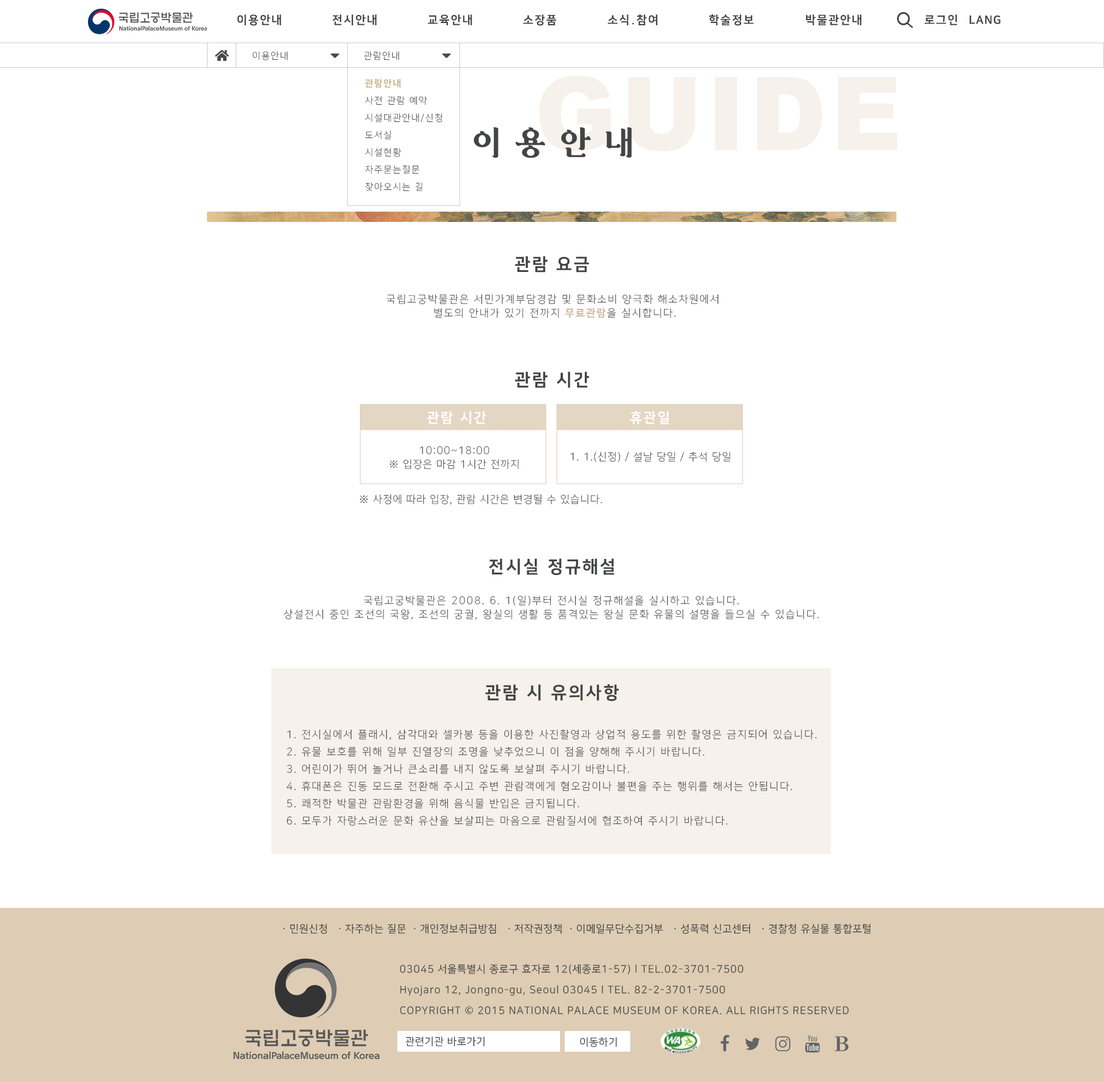
<style>
.page{position:relative;width:1104px;height:1081px;background:#ffffff}
.page>*{position:absolute;margin:0}
.t1{font:11.5px "NanumSquare_acEB";letter-spacing:0.15em;color:#434446}
.t2{font:11.5px "NanumSquare_acEB";letter-spacing:0.05em;color:#434446}
.t3{font:9.2px "NanumSquare_acL";letter-spacing:0.15em;color:#434446}
.t4{font:102.6px "Arial-Black";letter-spacing:0.05em;color:#f6f1ea;scale:0.95 1}
.t5{font:9.2px/17.2px "NanumSquare_acL";letter-spacing:0.15em;color:#434446}
.t6{font:9.2px/17.2px "NanumSquare_acEB";letter-spacing:0.15em;color:#cdb691}
.t7{font:31.6px "MuseumClassicBold";letter-spacing:0.4em;color:#434446}
.t8{font:17.2px "NanumSquare_acEB";letter-spacing:0.15em;color:#434446}
.t9{font:10.3px/13.8px "NanumSquare_acL";letter-spacing:0.15em;color:#434446}
.t10{font:10.3px/13.8px "NanumSquare_acEB";letter-spacing:0.15em;color:#ccb89d}
.t11{font:13.8px "NanumSquare_acEB";letter-spacing:0.15em;color:#ffffff}
.t12{font:10.3px/13.8px "NanumSquare_acL";letter-spacing:0.1em;color:#434446}
.t13{font:10.3px "NanumSquare_acL";letter-spacing:0.1em;color:#434446}
.t14{font:10.3px/17.2px "NanumSquare_acL";letter-spacing:0.15em;color:#434446}
.t15{font:10.3px "NanumSquare_acR";letter-spacing:0.075em;color:#434446}
.t16{font:10.3px/20.7px "NanumSquare_acR";letter-spacing:0.075em;color:#434446}
</style>
<div class="page">
<p class="t1" style="left:237px;top:14px;width:44px;height:12px">이용안내</p>
<p class="t1" style="left:332px;top:14px;width:44px;height:11px">전시안내</p>
<p class="t1" style="left:428px;top:14px;width:44px;height:11px">교육안내</p>
<p class="t1" style="left:523px;top:14px;width:33px;height:12px">소장품</p>
<p class="t1" style="left:608px;top:14px;width:50px;height:11px">소식.참여</p>
<p class="t1" style="left:709px;top:14px;width:45px;height:12px">학술정보</p>
<p class="t1" style="left:805px;top:14px;width:56px;height:11px">박물관안내</p>
<p class="t1" style="left:924px;top:14px;width:33px;height:11px">로그인</p>
<p class="t2" style="left:969px;top:16px;width:31px;height:8px">LANG</p>
<p class="t3" style="left:252px;top:51px;width:35px;height:9px">이용안내</p>
<p class="t3" style="left:363px;top:51px;width:36px;height:9px">관람안내</p>
<p class="t4" style="left:539px;top:76px;width:358px;height:75px">GUIDE</p>
<p class="t5" style="left:364px;top:79px;width:78px;height:112px"><span class="t6">관람안내<br></span>사전 관람 예약<br>시설대관안내/신청<br>도서실<br>시설현황<br>자주묻는질문<br>찾아오시는 길</p>
<p class="t7" style="left:474px;top:127px;width:158px;height:31px">이용안내</p>
<p class="t8" style="left:514px;top:256px;width:75px;height:16px">관람 요금</p>
<p class="t9" style="left:386px;top:294px;width:332px;height:24px;text-align:center">국립고궁박물관은 서민가계부담경감 및 문화소비 양극화 해소차원에서 <br>별도의 안내가 있기 전까지 <span class="t10">무료관람</span>을 실시합니다.</p>
<p class="t8" style="left:514px;top:371px;width:75px;height:17px">관람 시간</p>
<p class="t11" style="left:426px;top:411px;width:60px;height:13px">관람 시간</p>
<p class="t11" style="left:629px;top:410px;width:40px;height:14px">휴관일</p>
<p class="t12" style="left:390px;top:446px;width:128px;height:23px;text-align:center">10:00~18:00<br>※ 입장은 마감 1시간 전까지</p>
<p class="t13" style="left:570px;top:451px;width:160px;height:11px">1. 1.(신정) / 설날 당일 / 추석 당일</p>
<p class="t13" style="left:360px;top:494px;width:242px;height:11px">※ 사정에 따라 입장, 관람 시간은 변경될 수 있습니다.</p>
<p class="t8" style="left:489px;top:558px;width:125px;height:17px">전시실 정규해설</p>
<p class="t9" style="left:283px;top:595px;width:535px;height:25px;text-align:center">국립고궁박물관은 2008. 6. 1(일)부터 전시실 정규해설을 실시하고 있습니다.<br>상설전시 중인 조선의 국왕, 조선의 궁궐, 왕실의 생활 등 품격있는 왕실 문화 유물의 설명을 들으실 수 있습니다.</p>
<p class="t8" style="left:485px;top:684px;width:133px;height:17px">관람 시 유의사항</p>
<p class="t14" style="left:286px;top:729px;width:530px;height:96px">1. 전시실에서 플래시, 삼각대와 셀카봉 등을 이용한 사진촬영과 상업적 용도를 위한 촬영은 금지되어 있습니다.<br>2. 유물 보호를 위해 일부 진열장의 조명을 낮추었으니 이 점을 양해해 주시기 바랍니다.<br>3. 어린이가 뛰어 놀거나 큰소리를 내지 않도록 보살펴 주시기 바랍니다.<br>4. 휴대폰은 진동 모드로 전환해 주시고 주변 관람객에게 혐오감이나 불편을 주는 행위를 해서는 안됩니다.<br>5. 쾌적한 박물관 관람환경을 위해 음식물 반입은 금지됩니다.<br>6. 모두가 자랑스러운 문화 유산을 보살피는 마음으로 관람질서에 협조하여 주시기 바랍니다.</p>
<p class="t15" style="left:283px;top:923px;width:588px;height:11px">ㆍ민원신청  ㆍ자주하는 질문 ㆍ개인정보취급방침  ㆍ저작권정책 ㆍ이메일무단수집거부  ㆍ성폭력 신고센터  ㆍ경찰청 유실물 통합포털</p>
<p class="t16" style="left:399px;top:963px;width:449px;height:51px">03045 서울특별시 종로구 효자로 12(세종로1-57) l TEL.02-3701-7500<br>Hyojaro 12, Jongno-gu, Seoul 03045 l TEL. 82-2-3701-7500<br>COPYRIGHT © 2015 NATIONAL PALACE MUSEUM OF KOREA. ALL RIGHTS RESERVED</p>
<p class="t15" style="left:405px;top:1036px;width:80px;height:10px">관련기관 바로가기</p>
<p class="t15" style="left:579px;top:1036px;width:38px;height:11px">이동하기</p>
</div>
